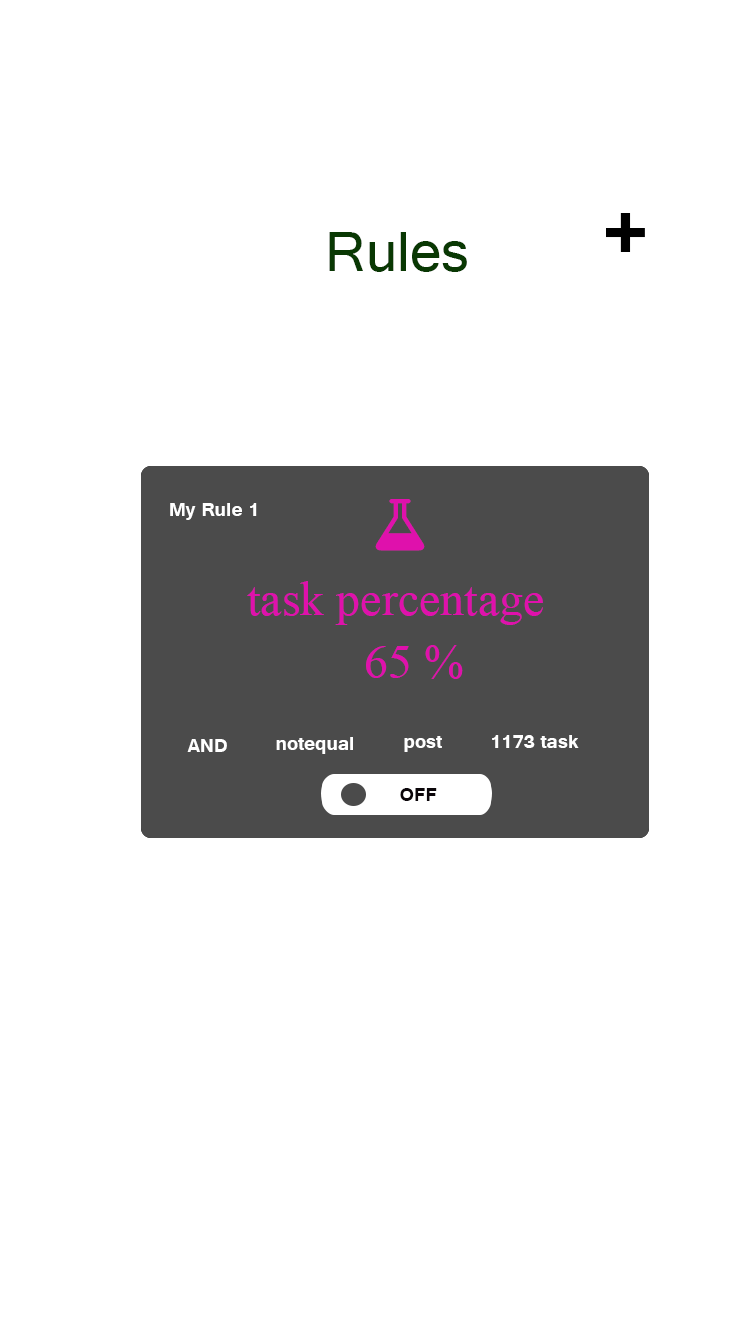
<style>
.page{position:relative;width:750px;height:1334px;background:#ffffff}
.page>*{position:absolute;margin:0}
.t1{font:103.1px "Tunga-Bold";color:#000000}
.t2{font:72px "Tunga";color:#093803}
.t3{font:24px "Tunga-Bold";color:#ffffff}
.t4{font:48px "TimesNewRomanPSMT";color:#df11ac}
.t5{font:24px "Tunga-Bold";color:#0b060a}
</style>
<div class="page">
<p class="t1" style="left:606px;top:213px;width:39px;height:39px">+</p>
<p class="t2" style="left:329px;top:232px;width:138px;height:40px">Rules</p>
<p class="t3" style="left:170px;top:503px;width:87px;height:17px">My Rule 1</p>
<p class="t4" style="left:247px;top:581px;width:296px;height:44px">task percentage</p>
<p class="t4" style="left:247px;top:581px;width:296px;height:44px">task percentage</p>
<p class="t4" style="left:366px;top:645px;width:97px;height:34px">65 %</p>
<p class="t4" style="left:366px;top:645px;width:97px;height:34px">65 %</p>
<p class="t3" style="left:276px;top:737px;width:77px;height:17px">notequal</p>
<p class="t3" style="left:276px;top:737px;width:77px;height:17px">notequal</p>
<p class="t3" style="left:404px;top:736px;width:38px;height:16px">post</p>
<p class="t3" style="left:404px;top:736px;width:38px;height:16px">post</p>
<p class="t3" style="left:492px;top:735px;width:87px;height:13px">1173 task</p>
<p class="t3" style="left:492px;top:735px;width:87px;height:13px">1173 task</p>
<p class="t3" style="left:187px;top:739px;width:40px;height:13px">AND</p>
<p class="t3" style="left:187px;top:739px;width:40px;height:13px">AND</p>
<p class="t5" style="left:400px;top:788px;width:37px;height:13px">OFF</p>
</div>
